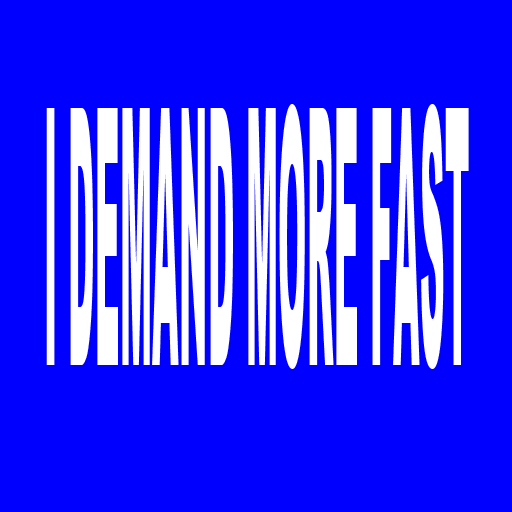
<style>
.page{position:relative;width:512px;height:512px;background:#0000ff}
.page>*{position:absolute;margin:0}
.t1{font:358.9px "Arial-Black";color:#ffffff;scale:0.1 1}
</style>
<div class="page">
<p class="t1" style="left:46px;top:104px;width:423px;height:265px">I DEMAND MORE FAST</p>
</div>
